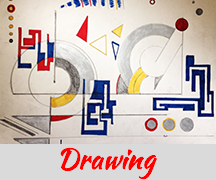
<style>
.page{position:relative;width:216px;height:180px}
.page>*{position:absolute;margin:0}
.t1{font:28px "KaushanScript-Regular";color:#ff0000}
</style>
<div class="page">
<p class="t1" style="left:60px;top:147px;width:97px;height:33px">Drawing</p>
</div>
